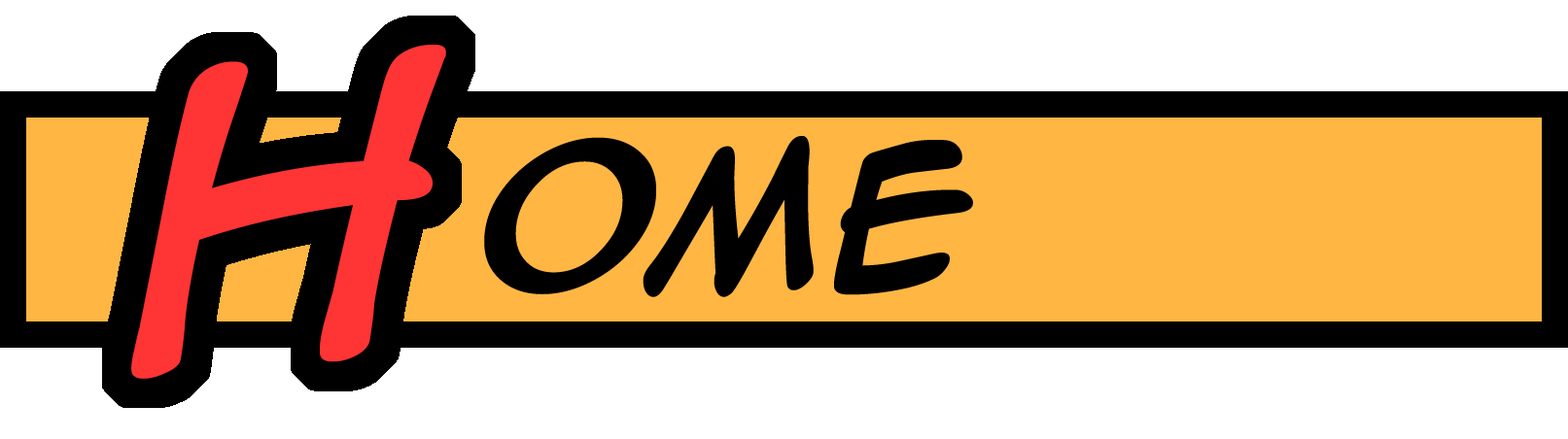
<style>
.page{position:relative;width:1568px;height:439px;background:#ffffff}
.page>*{position:absolute;margin:0}
.t1{font:162px "AnimeAce2.0BB-Bold";color:#000000}
</style>
<div class="page">
<p class="t1" style="left:484px;top:136px;width:489px;height:161px">ome</p>
</div>
